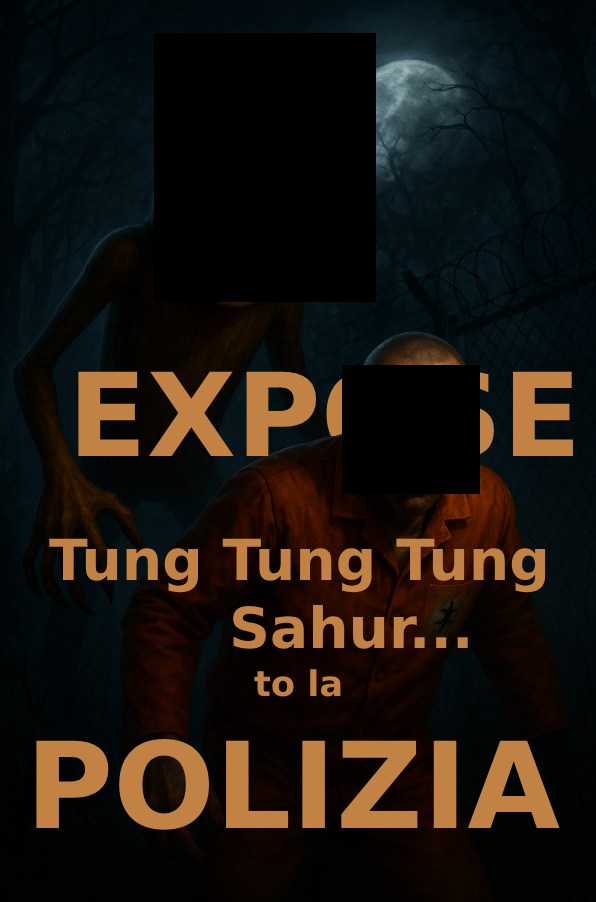
<style>
.page{position:relative;width:596px;height:902px}
.page>*{position:absolute;margin:0}
.t1{font:56.7px "DejaVuSans-Bold";color:#c18243}
.t2{font:35.2px "DejaVuSans-Bold";color:#c18243}
.t3{font:119.8px "DejaVuSans-Bold";color:#c18243}
</style>
<div class="page">
<p class="t1" style="left:49px;top:538px;width:497px;height:111px">Tung Tung Tung<br>   Sahur...</p>
<p class="t2" style="left:254px;top:669px;width:87px;height:28px">to la</p>
<p class="t3" style="left:36px;top:739px;width:524px;height:91px">POLIZIA</p>
</div>
